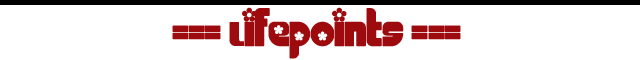
<style>
.page{position:relative;width:640px;height:60px;background:#ffffff}
.page>*{position:absolute;margin:0}
.t1{font:48px "Chick";color:#9e0b0e}
</style>
<div class="page">
<p class="t1" style="left:172px;top:7px;width:289px;height:52px">=== Lifepoints ===</p>
</div>
